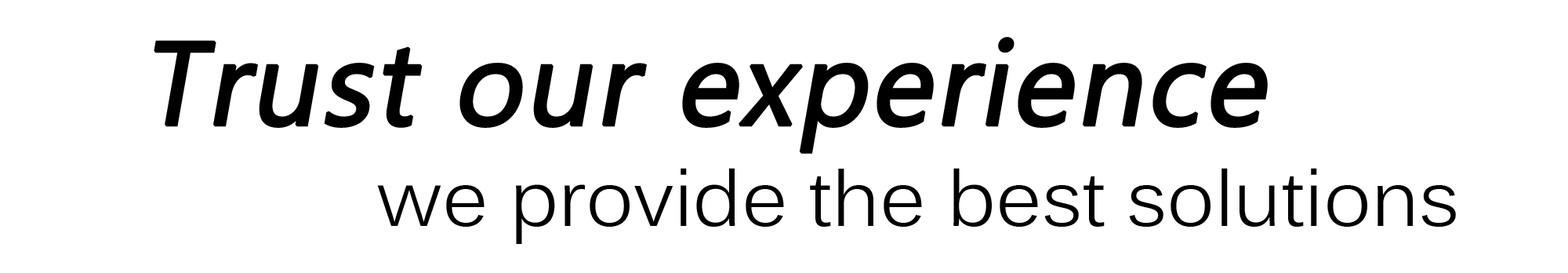
<style>
.page{position:relative;width:1568px;height:273px;background:#ffffff}
.page>*{position:absolute;margin:0}
.t1{font:117.6px "SegoeUISymbol";color:#000000;font-weight:bold;font-style:italic}
.t2{font:78.4px "Kalinga";color:#000000}
</style>
<div class="page">
<p class="t1" style="left:154px;top:37px;width:1114px;height:117px">Trust our experience</p>
<p class="t2" style="left:377px;top:168px;width:1079px;height:76px">we provide the best solutions</p>
</div>
